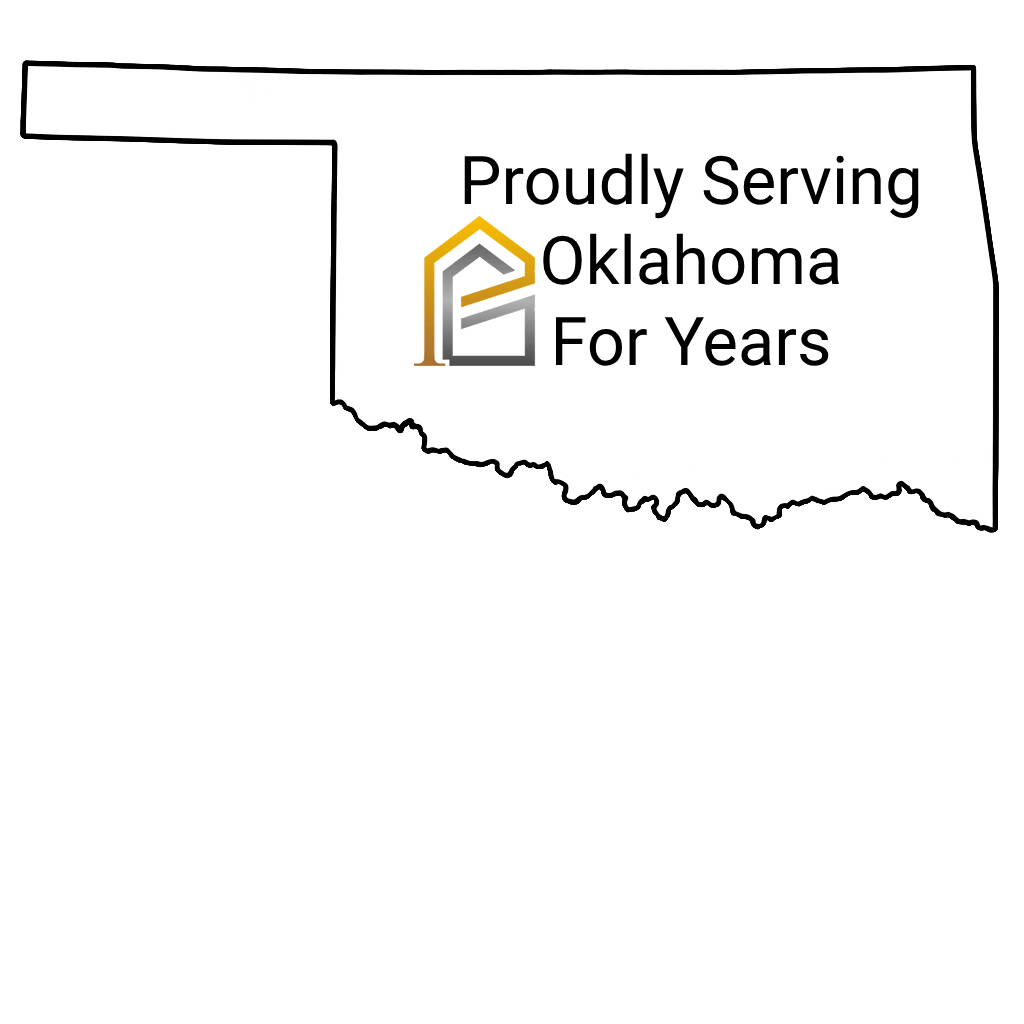
<style>
.page{position:relative;width:1024px;height:1024px;background:#ffffff}
.page>*{position:absolute;margin:0}
.t1{font:67px "Roboto-Regular";color:#000000}
</style>
<div class="page">
<p class="t1" style="left:464px;top:153px;width:455px;height:213px;text-align:center">Proudly Serving<br>Oklahoma<br>For Years</p>
</div>
